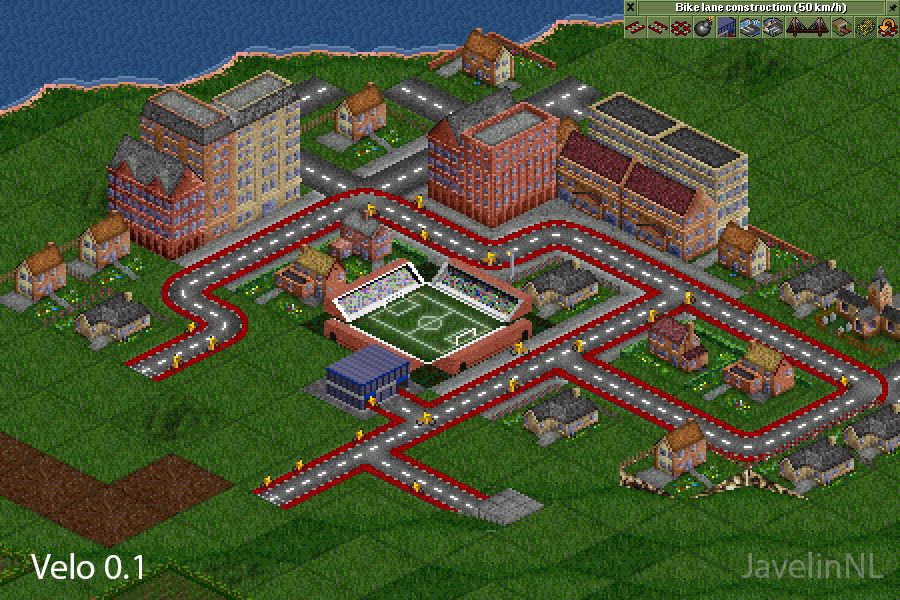
<style>
.page{position:relative;width:900px;height:600px}
.page>*{position:absolute;margin:0}
.t1{font:36px "MyriadPro-Regular";color:#ffffff}
.t2{font:36px "MyriadPro-Regular";color:#6c835d}
</style>
<div class="page">
<p class="t1" style="left:31px;top:553px;width:111px;height:26px">Velo 0.1</p>
<p class="t2" style="left:741px;top:552px;width:143px;height:26px">JavelinNL</p>
</div>
